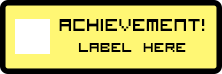
<style>
.page{position:relative;width:222px;height:74px;background:#fff774}
.page>*{position:absolute;margin:0}
.t1{font:23px "VisitorTT1BRK";color:#000000}
.t2{font:18px "VisitorTT1BRK";color:#000000}
</style>
<div class="page">
<p class="t1" style="left:59px;top:19px;width:146px;height:33px;text-align:center">achievement!<br><span class="t2">label here</span></p>
</div>
